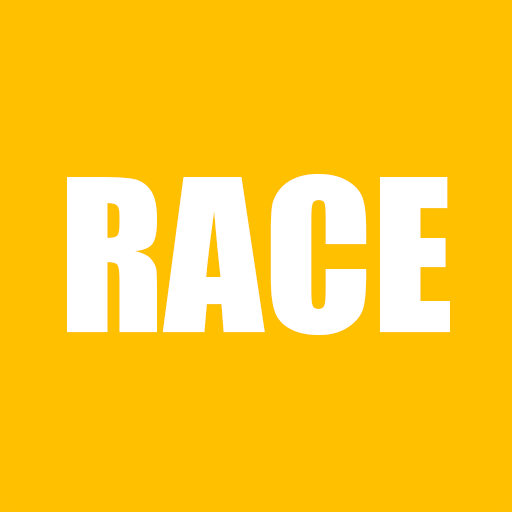
<style>
.page{position:relative;width:512px;height:512px;background:#ffc000}
.page>*{position:absolute;margin:0}
.t1{font:195.7px "Impact";color:#ffffff}
</style>
<div class="page">
<p class="t1" style="left:67px;top:174px;width:383px;height:161px">RACE</p>
</div>
